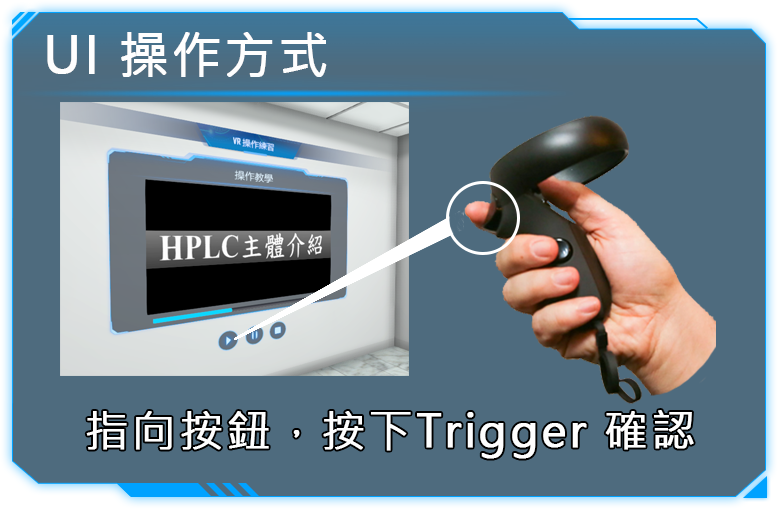
<style>
.page{position:relative;width:778px;height:509px;background:#4e6b7e}
.page>*{position:absolute;margin:0}
.t1{font:49.5px "MicrosoftJhengHeiRegular";letter-spacing:0.05em;color:#fefefe;font-weight:bold}
.t2{font:44px "MicrosoftJhengHeiRegular";letter-spacing:0.05em;color:#fefefe;font-weight:bold}
</style>
<div class="page">
<p class="t1" style="left:47px;top:32px;width:280px;height:45px">UI 操作方式</p>
<p class="t2" style="left:86px;top:410px;width:608px;height:49px">指向按鈕，按下Trigger 確認</p>
</div>
